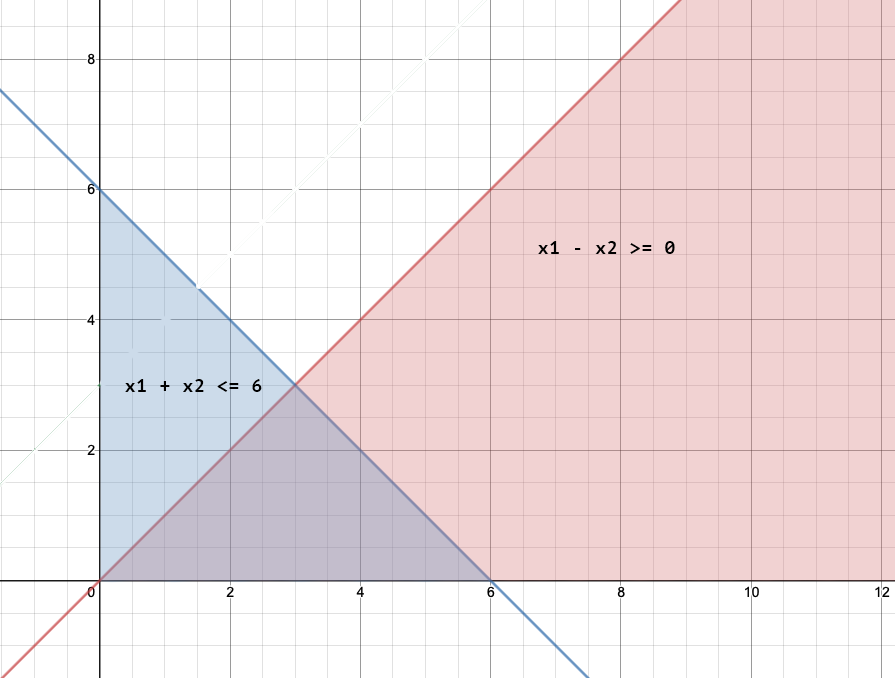
<style>
.page{position:relative;width:895px;height:678px;background:#f1d2d2}
.page>*{position:absolute;margin:0}
.t1{font:18px "PTMono-Bold";letter-spacing:0.04em;color:#000000}
</style>
<div class="page">
<p class="t1" style="left:538px;top:241px;width:137px;height:13px">x1 - x2 &gt;= 0</p>
<p class="t1" style="left:125px;top:379px;width:137px;height:13px">x1 + x2 &lt;= 6</p>
</div>
